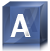
<style>
.page{position:relative;width:50px;height:51px}
.page>*{position:absolute;margin:0}
.t1{font:30px "CharcoalCY";color:#f8f8f8}
</style>
<div class="page">
<p class="t1" style="left:10px;top:14px;width:21px;height:23px">A</p>
</div>
